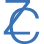
<style>
.page{position:relative;width:44px;height:44px;background:#ffffff}
.page>*{position:absolute;margin:0}
.t1{font:48px "Helvetica-Light";color:#3a72b4}
</style>
<div class="page">
<p class="t1" style="left:3px;top:0px;width:27px;height:35px">Z</p>
<p class="t1" style="left:9px;top:7px;width:31px;height:37px">C</p>
</div>
